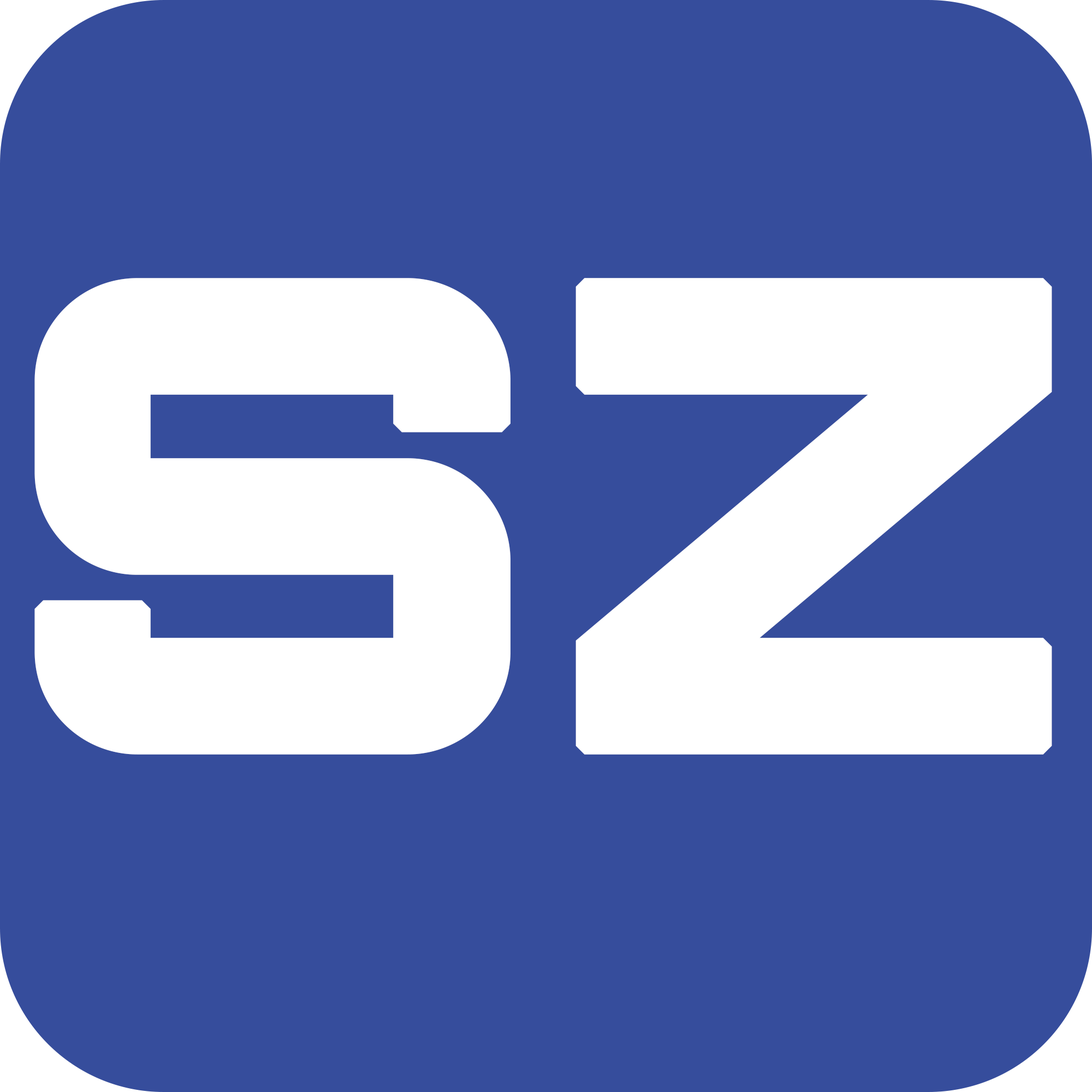
<style>
.page{position:relative;width:1092px;height:1092px;background:#364d9c}
.page>*{position:absolute;margin:0}
.t1{font:637px "Orbitron-Black";color:#ffffff;font-weight:bold}
</style>
<div class="page">
<p class="t1" style="left:34px;top:278px;width:1018px;height:477px">SZ</p>
</div>
